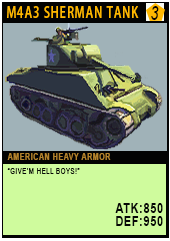
<style>
.page{position:relative;width:170px;height:241px;background:#cffb9d}
.page>*{position:absolute;margin:0}
.t1{font:15.1px "AdobeHeitiStd-Regular";letter-spacing:0.08em;color:#ffb800;text-transform:uppercase;scale:0.76 1}
.t2{font:19px "Arial-ItalicMT";letter-spacing:0.08em;color:#020200;text-transform:uppercase;scale:0.76 1}
.t3{font:9.3px/20.2px "Arial-BoldMT";letter-spacing:0.08em;color:#b4832c;text-transform:uppercase;scale:0.76 1}
.t4{font:8.1px/14.2px "ArialMT";letter-spacing:0.08em;color:#050606;text-transform:uppercase;scale:0.76 1}
.t5{font:13.9px/12.5px "Arial-BoldMT";letter-spacing:0.08em;color:#050606;text-transform:uppercase;scale:0.76 1}
</style>
<div class="page">
<p class="t1" style="left:7px;top:6px;width:132px;height:12px">M4a3 Sherman Tank</p>
<p class="t2" style="left:151px;top:6px;width:8px;height:14px">3</p>
<p class="t3" style="left:7px;top:153px;width:156px;height:73px">American heavy Armor<br><span class="t4">“give’m hell boys!”<br><br><br></span><span class="t5">Atk:850<br>Def:950</span></p>
</div>
